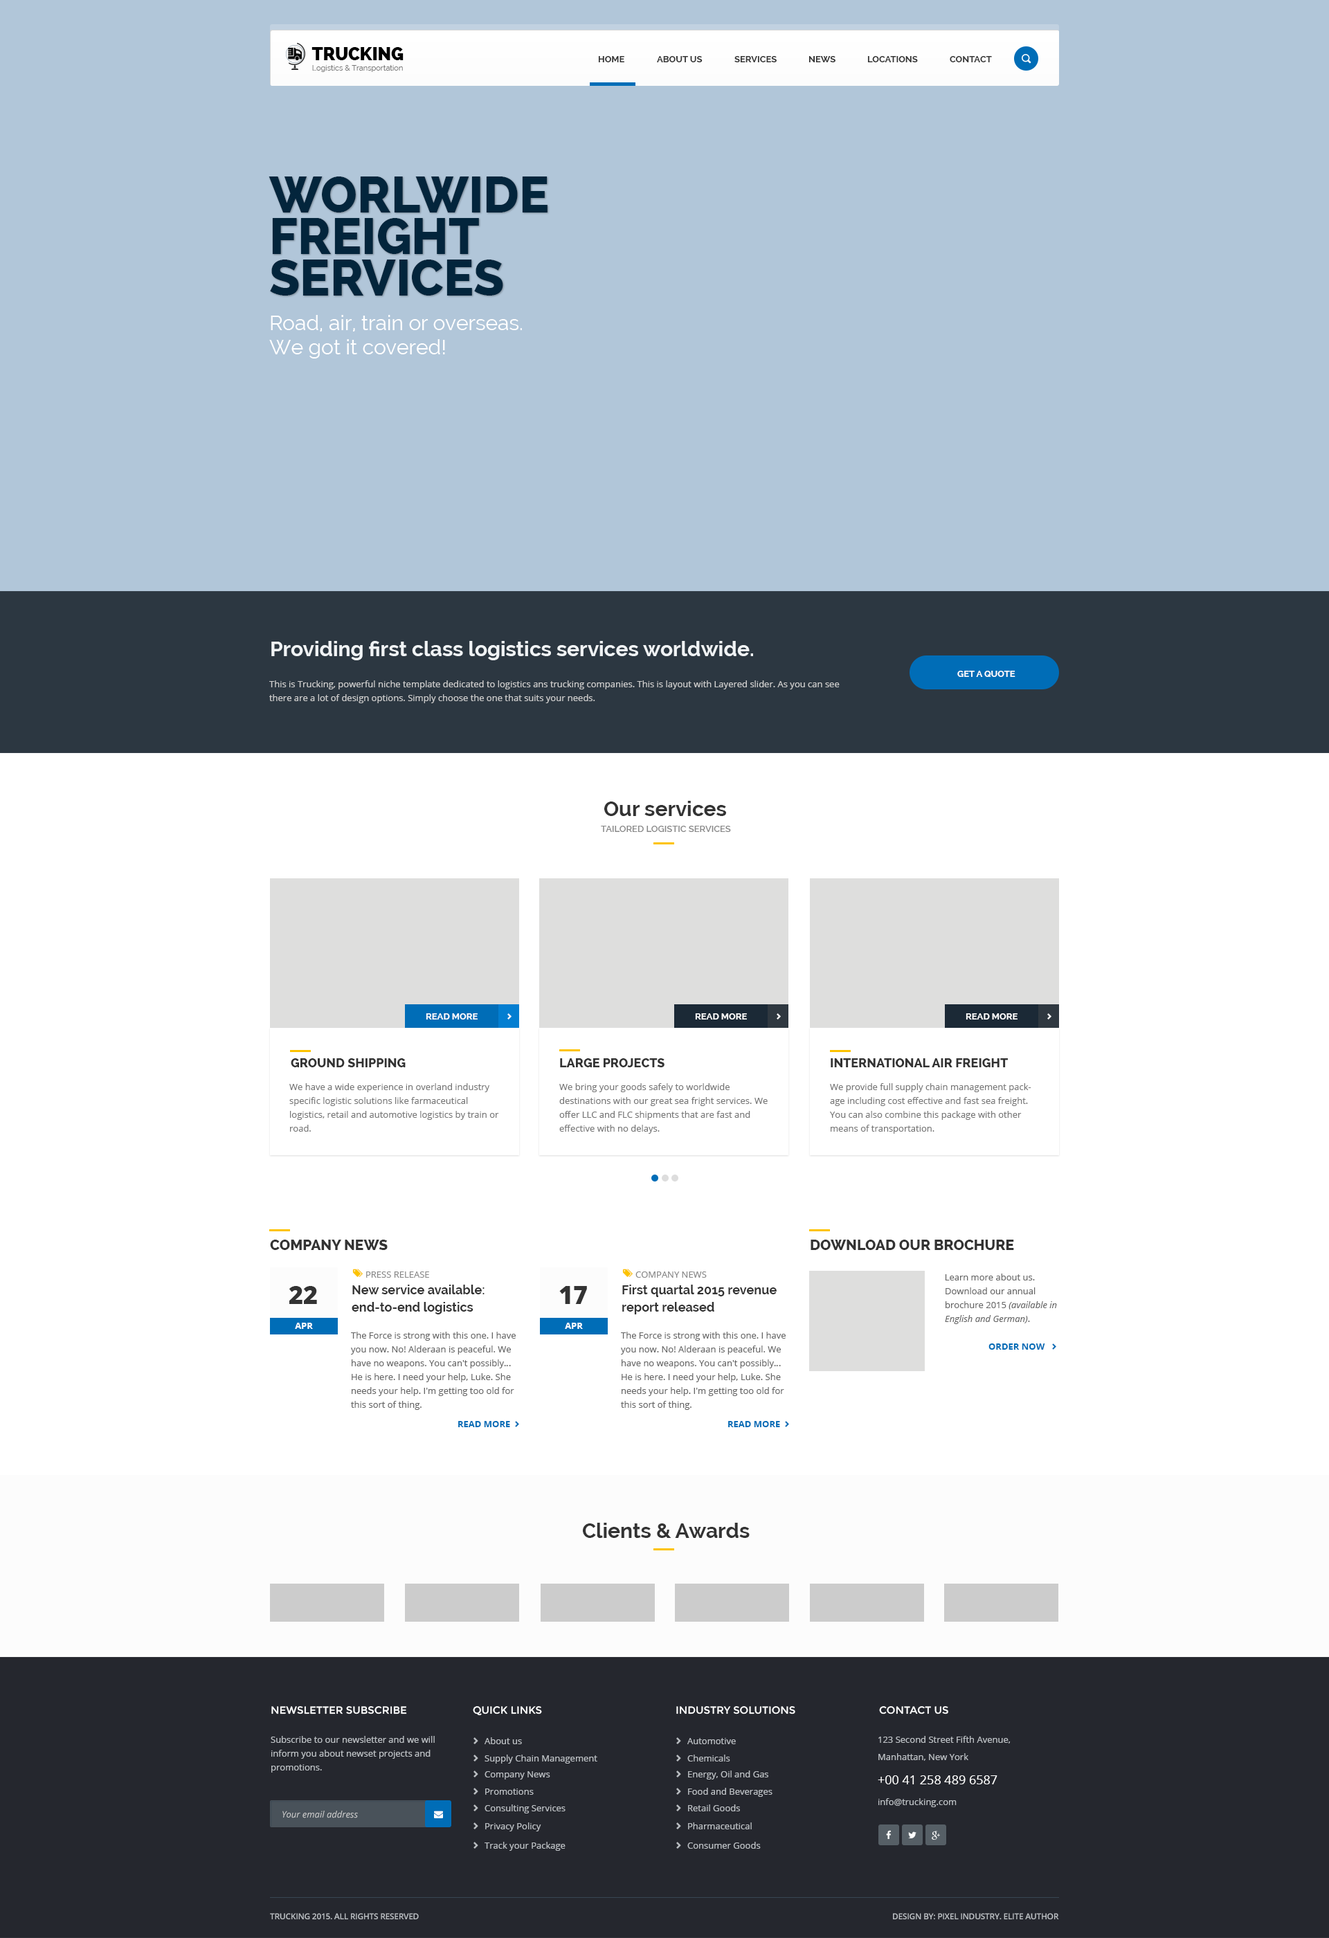
<style>
.page{position:relative;width:1329px;height:1938px;background:#ffffff}
.page>*{position:absolute;margin:0}
.t1{font:17.9px "Raleway-Heavy";color:#010101;text-transform:uppercase}
.t2{font:7.7px "Raleway";color:#777777}
.t3{font:9px "Raleway-Bold";color:#333333;text-transform:uppercase}
.t4{font:49.8px/41.5px "Raleway-ExtraBold";color:#03253c;text-transform:uppercase}
.t5{font:20.8px/24.2px "Raleway";color:#fefefe}
.t6{font:20.8px "Raleway-Bold";color:#f0f3f5}
.t7{font:9px "Raleway-Bold";color:#ffffff}
.t8{font:9px/13.8px "OpenSans";color:#cccccc}
.t9{font:20.8px "Raleway-Bold";color:#333333}
.t10{font:9px "Raleway-SemiBold";color:#888888}
.t11{font:12.5px "Raleway-ExtraBold";color:#333333;text-transform:uppercase}
.t12{font:9px/13.8px "OpenSans";color:#777777}
.t13{font:14.5px "Raleway-ExtraBold";color:#333333;text-transform:uppercase}
.t14{font:9px "OpenSans";color:#888888}
.t15{font:9px/13.8px "OpenSans";color:#666666}
.t16{font:9px/13.8px "OpenSans-Italic";color:#666666}
.t17{font:24.9px "OpenSans-Extrabold";color:#333333}
.t18{font:12.5px/17.3px "Raleway-Bold";color:#333333}
.t19{font:9px "OpenSans-Bold";color:#ffffff}
.t20{font:9px "OpenSans-Bold";color:#006db7;text-transform:uppercase}
.t21{font:10.4px "Montserrat-Regular";color:#ffffff;text-transform:uppercase}
.t22{font:9px/13.8px "OpenSans";color:#bcc0c4}
.t23{font:9px "OpenSans";color:#bcc0c4}
.t24{font:12.5px "OpenSans";color:#ffffff}
.t25{font:9px "OpenSans-Italic";color:#cccccc}
.t26{font:8.3px "OpenSans-Semibold";letter-spacing:-0.025em;color:#bcc0c4;text-transform:uppercase}
</style>
<div class="page">
<p class="t1" style="left:312px;top:47px;width:92px;height:13px">TRUCKING</p>
<p class="t2" style="left:312px;top:65px;width:91px;height:7px">Logistics &amp; Transportation</p>
<p class="t3" style="left:598px;top:56px;width:26px;height:6px">HOME</p>
<p class="t3" style="left:657px;top:56px;width:46px;height:6px">ABOUT US</p>
<p class="t3" style="left:735px;top:56px;width:42px;height:6px">SERVICES</p>
<p class="t3" style="left:809px;top:56px;width:27px;height:6px">NEWS</p>
<p class="t3" style="left:867px;top:56px;width:51px;height:6px">LOCATIONS</p>
<p class="t3" style="left:950px;top:56px;width:42px;height:6px">CONTACT</p>
<p class="t4" style="left:269px;top:177px;width:279px;height:119px">WORLWIDE <br>FREIGHT <br>SERVICES</p>
<p class="t5" style="left:269px;top:315px;width:253px;height:44px">Road, air, train or overseas. <br>We got it covered!</p>
<p class="t6" style="left:271px;top:641px;width:482px;height:19px">Providing first class logistics services worldwide.</p>
<p class="t7" style="left:957px;top:671px;width:59px;height:6px">GET A QUOTE</p>
<p class="t8" style="left:269px;top:681px;width:571px;height:22px">This is Trucking, powerful niche template dedicated to logistics ans trucking companies. This is layout with Layered slider. As you can see there are a lot of design options. Simply choose the one that suits your needs.</p>
<p class="t9" style="left:604px;top:801px;width:122px;height:15px">Our services</p>
<p class="t10" style="left:601px;top:826px;width:130px;height:6px">TAILORED LOGISTIC SERVICES</p>
<p class="t7" style="left:426px;top:1014px;width:52px;height:6px">READ MORE</p>
<p class="t7" style="left:695px;top:1014px;width:52px;height:6px">READ MORE</p>
<p class="t7" style="left:966px;top:1014px;width:52px;height:6px">READ MORE</p>
<p class="t11" style="left:291px;top:1059px;width:115px;height:9px">GROUND SHIPPING</p>
<p class="t11" style="left:560px;top:1059px;width:105px;height:9px">LARGE PROJECTS</p>
<p class="t11" style="left:831px;top:1059px;width:177px;height:9px">INTERNATIONAL AIR FREIGHT</p>
<p class="t12" style="left:289px;top:1083px;width:210px;height:49px">We have a wide experience in overland industry specific logistic solutions like farmaceutical <br>logistics, retail and automotive logistics by train or road.</p>
<p class="t12" style="left:559px;top:1083px;width:209px;height:51px">We bring your goods safely to worldwide <br>destinations with our great sea fright services. We offer LLC and FLC shipments that are fast and effective with no delays.</p>
<p class="t12" style="left:830px;top:1083px;width:202px;height:51px">We provide full supply chain management package including cost effective and fast sea freight. You can also combine this package with other means of transportation.</p>
<p class="t13" style="left:270px;top:1240px;width:118px;height:10px">company news</p>
<p class="t13" style="left:811px;top:1240px;width:203px;height:10px">download our brochure</p>
<p class="t14" style="left:366px;top:1272px;width:63px;height:6px">PRESS RELEASE</p>
<p class="t14" style="left:636px;top:1272px;width:71px;height:6px">COMPANY NEWS</p>
<p class="t15" style="left:945px;top:1274px;width:112px;height:50px">Learn more about us. Download our annual brochure 2015 <span class="t16">(available in English and German)</span>.</p>
<p class="t17" style="left:289px;top:1286px;width:28px;height:18px">22</p>
<p class="t18" style="left:352px;top:1285px;width:133px;height:30px">New service available: end-to-end logistics</p>
<p class="t17" style="left:559px;top:1286px;width:28px;height:18px">17</p>
<p class="t18" style="left:622px;top:1285px;width:155px;height:30px">First quartal 2015 revenue report released</p>
<p class="t19" style="left:295px;top:1323px;width:18px;height:6px">APR</p>
<p class="t19" style="left:565px;top:1323px;width:18px;height:6px">APR</p>
<p class="t15" style="left:351px;top:1332px;width:165px;height:78px">The Force is strong with this one. I have you now. No! Alderaan is peaceful. We have no weapons. You can't possibly… He is here. I need your help, Luke. She needs your help. I'm getting too old for this sort of thing.</p>
<p class="t15" style="left:621px;top:1332px;width:165px;height:78px">The Force is strong with this one. I have you now. No! Alderaan is peaceful. We have no weapons. You can't possibly… He is here. I need your help, Luke. She needs your help. I'm getting too old for this sort of thing.</p>
<p class="t20" style="left:989px;top:1344px;width:56px;height:6px">ORDER NOW</p>
<p class="t20" style="left:458px;top:1421px;width:52px;height:7px">Read more</p>
<p class="t20" style="left:728px;top:1421px;width:52px;height:7px">Read more</p>
<p class="t9" style="left:583px;top:1523px;width:167px;height:15px">Clients &amp; Awards</p>
<p class="t21" style="left:271px;top:1707px;width:136px;height:8px">newsletter subscribe</p>
<p class="t21" style="left:473px;top:1707px;width:69px;height:9px">quick links</p>
<p class="t21" style="left:676px;top:1707px;width:119px;height:8px">INDUSTRY SOLUTIONS</p>
<p class="t21" style="left:879px;top:1707px;width:69px;height:8px">contact us</p>
<p class="t22" style="left:271px;top:1736px;width:164px;height:37px">Subscribe to our newsletter and we will inform you about newset projects and promotions.</p>
<p class="t23" style="left:485px;top:1738px;width:37px;height:7px">About us</p>
<p class="t23" style="left:687px;top:1738px;width:49px;height:7px">Automotive</p>
<p class="t22" style="left:879px;top:1736px;width:132px;height:25px">123 Second Street Fifth Avenue, <br>Manhattan, New York</p>
<p class="t23" style="left:485px;top:1755px;width:112px;height:9px">Supply Chain Management</p>
<p class="t23" style="left:687px;top:1755px;width:43px;height:7px">Chemicals</p>
<p class="t23" style="left:485px;top:1772px;width:65px;height:8px">Company News</p>
<p class="t23" style="left:688px;top:1771px;width:80px;height:9px">Energy, Oil and Gas</p>
<p class="t24" style="left:878px;top:1776px;width:120px;height:9px">+00 41 258 489 6587</p>
<p class="t23" style="left:485px;top:1789px;width:49px;height:6px">Promotions</p>
<p class="t23" style="left:688px;top:1788px;width:85px;height:9px">Food and Beverages</p>
<p class="t23" style="left:485px;top:1805px;width:81px;height:9px">Consulting Services</p>
<p class="t23" style="left:688px;top:1805px;width:52px;height:7px">Retail Goods</p>
<p class="t23" style="left:879px;top:1799px;width:78px;height:9px">info@trucking.com</p>
<p class="t25" style="left:282px;top:1811px;width:76px;height:8px">Your email address</p>
<p class="t23" style="left:485px;top:1823px;width:56px;height:9px">Privacy Policy</p>
<p class="t23" style="left:688px;top:1823px;width:64px;height:7px">Pharmaceutical</p>
<p class="t23" style="left:485px;top:1842px;width:81px;height:9px">Track your Package</p>
<p class="t23" style="left:687px;top:1842px;width:74px;height:7px">Consumer Goods</p>
<p class="t26" style="left:270px;top:1914px;width:149px;height:6px">TRUCKING 2015. ALL RIGHTS RESERVED</p>
<p class="t26" style="left:893px;top:1914px;width:166px;height:6px">DESIGN BY: PIXEL INDUSTRY. ELITE AUTHOR</p>
</div>
